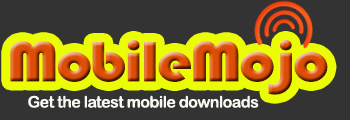
<style>
.page{position:relative;width:350px;height:120px;background:#333333}
.page>*{position:absolute;margin:0}
.t1{font:58.6px "Bauhaus93";letter-spacing:-0.035em;scale:1.09 1}
.t2{font:16px "ArialRoundedMTBold";letter-spacing:-0.035em;color:#fbfaf2}
</style>
<div class="page">
<p class="t1" style="left:10px;top:40px;width:318px;height:55px">MobileMojo</p>
<p class="t2" style="left:28px;top:95px;width:231px;height:13px">Get the latest mobile downloads</p>
</div>
